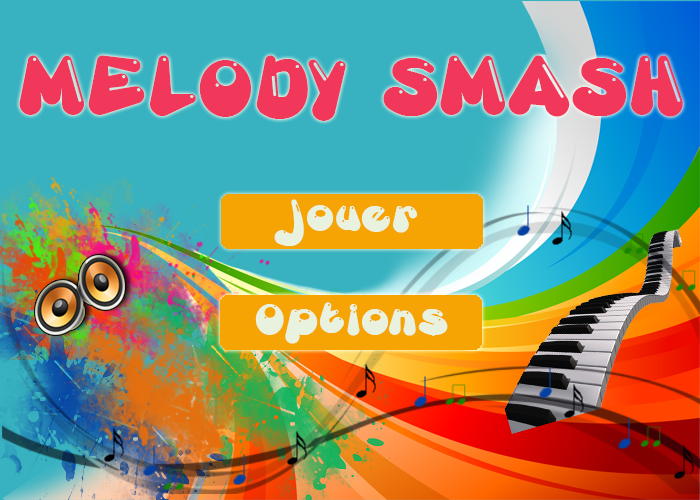
<style>
.page{position:relative;width:700px;height:500px;background:#38b2c0}
.page>*{position:absolute;margin:0}
.t1{font:61px "GretoonHighlight";letter-spacing:0.1em;color:#f2385a}
.t2{font:33px "GretoonHighlight";letter-spacing:0.1em;color:#e9f1df}
</style>
<div class="page">
<p class="t1" style="left:19px;top:55px;width:664px;height:66px">MELODY SMASH</p>
<p class="t2" style="left:274px;top:199px;width:144px;height:47px">Jouer</p>
<p class="t2" style="left:255px;top:302px;width:193px;height:42px">Options</p>
</div>
